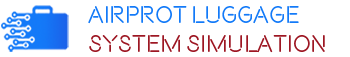
<style>
.page{position:relative;width:350px;height:57px;background:#ffffff}
.page>*{position:absolute;margin:0}
.t1{font:24px "Beon-Medium";color:#9d1723}
.t2{font:24px "Beon-Medium";color:#137af8}
</style>
<div class="page">
<p class="t1" style="left:88px;top:6px;width:237px;height:47px"><span class="t2">AirpRot Luggage <br></span>SYSTEM Simulation</p>
</div>
